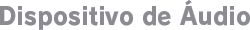
<style>
.page{position:relative;width:250px;height:30px;background:#ffffff}
.page>*{position:absolute;margin:0}
.t1{font:24.2px "RodinPro-EB";color:#8b8c92;scale:0.96 1}
</style>
<div class="page">
<p class="t1" style="left:0px;top:0px;width:250px;height:30px">Dispositivo de Áudio</p>
</div>
